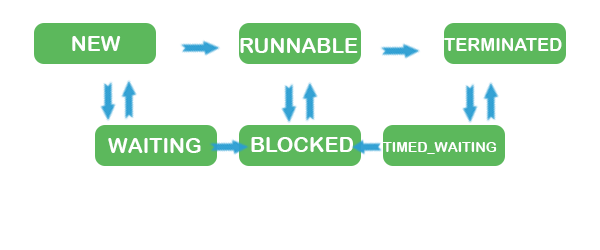
<style>
.page{position:relative;width:600px;height:250px;background:#ffffff}
.page>*{position:absolute;margin:0}
.t1{font:21px "ArialRoundedMTBold";color:#ffffff}
.t2{font:18px "ArialRoundedMTBold";color:#ffffff}
.t3{font:14px "ArialRoundedMTBold";color:#ffffff}
</style>
<div class="page">
<p class="t1" style="left:72px;top:36px;width:49px;height:15px">NEW</p>
<p class="t1" style="left:240px;top:38px;width:118px;height:15px">RUNNABLE</p>
<p class="t2" style="left:444px;top:38px;width:118px;height:13px">TERMINATED</p>
<p class="t1" style="left:251px;top:137px;width:102px;height:15px">BLOCKED</p>
<p class="t1" style="left:108px;top:138px;width:93px;height:15px">WAITING</p>
<p class="t3" style="left:383px;top:142px;width:114px;height:12px">TIMED_WAITING</p>
</div>
